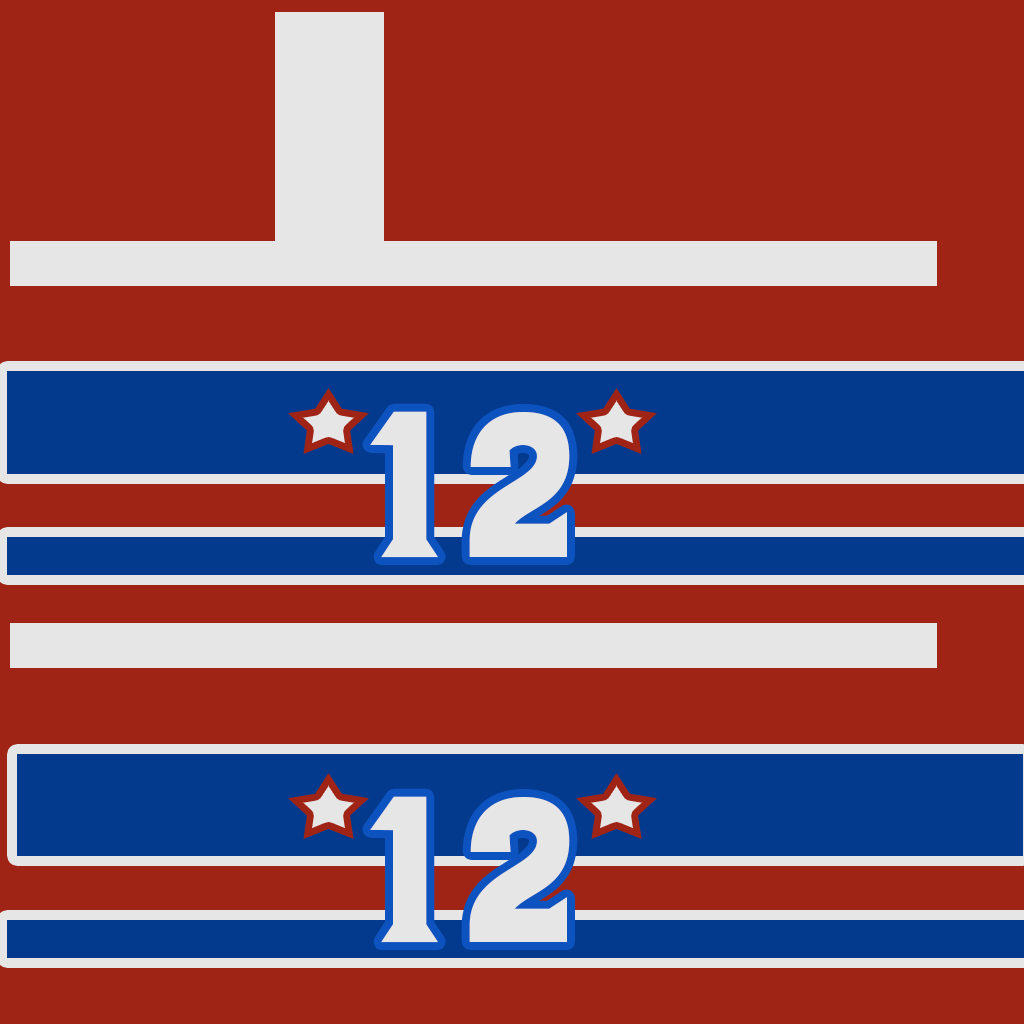
<style>
.page{position:relative;width:1024px;height:1024px;background:#9f2415}
.page>*{position:absolute;margin:0}
.t1{font:207.6px "Luchador-Regular";letter-spacing:0.05em;color:#e6e6e6}
</style>
<div class="page">
<p class="t1" style="left:370px;top:411px;width:200px;height:147px">12</p>
<p class="t1" style="left:370px;top:796px;width:200px;height:147px">12</p>
</div>
